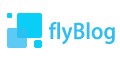
<style>
.page{position:relative;width:120px;height:60px;background:#ffffff}
.page>*{position:absolute;margin:0}
.t1{font:20.8px "AdobeHeitiStd-Regular";letter-spacing:0.01em;color:#30bdf1}
</style>
<div class="page">
<p class="t1" style="left:49px;top:22px;width:66px;height:23px">flyBlog</p>
</div>
